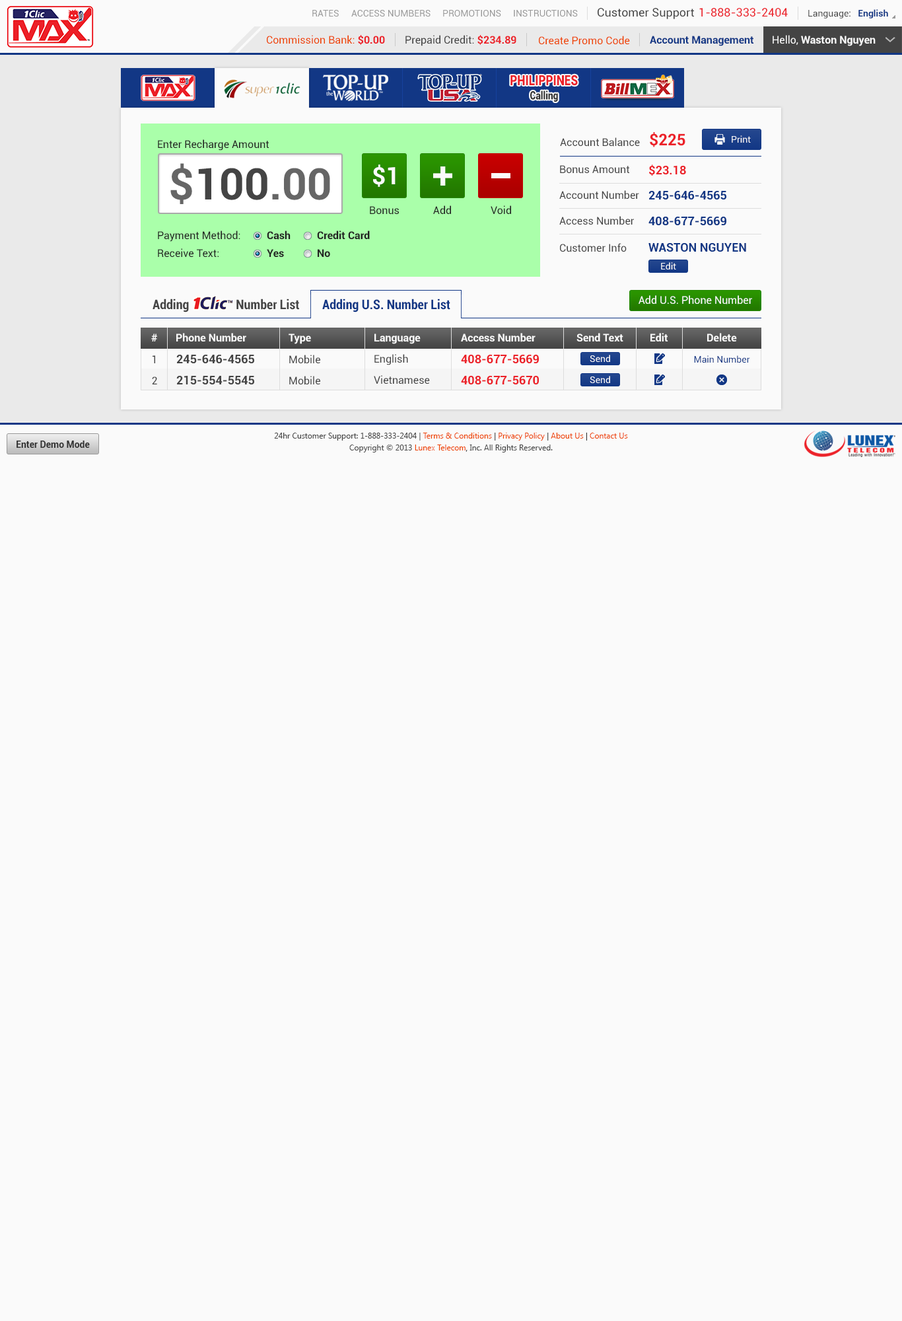
<style>
.page{position:relative;width:902px;height:1321px;background:#fafafa}
.page>*{position:absolute;margin:0}
.t1{font:9.2px "Roboto-Regular";color:#999999}
.t2{font:11.6px "Roboto-Regular";color:#444444}
.t3{font:11.6px "Roboto-Regular";color:#ec2029}
.t4{font:9.2px "Roboto-Regular";color:#444444}
.t5{font:9.2px "Roboto-Bold";color:#123785}
.t6{font:10.6px "Roboto-Regular";color:#ee4400}
.t7{font:10.6px "Roboto-Bold";color:#ec2028}
.t8{font:10.6px "Roboto-Regular";color:#444444}
.t9{font:10.6px "Roboto-Bold";color:#123785}
.t10{font:10.6px "Roboto-Bold";color:#fafafa}
.t11{font:10.6px "Roboto-Regular";color:#fafafa}
.t12{font:14.1px "Roboto-Black";color:#ec2028;scale:0.81 1}
.t13{font:11.3px "Roboto-Black";color:#333333;scale:0.81 1}
.t14{font:15.9px "Roboto-Bold";color:#ec2028}
.t15{font:9.2px "Roboto-Regular";color:#fafafa}
.t16{font:10.6px "Roboto-Regular";color:#222222}
.t17{font:43.6px "Roboto-Bold";color:#444444}
.t18{font:43.6px "Roboto-Bold";color:#666666}
.t19{font:23.8px "Roboto-Bold";color:#fafafa}
.t20{font:11.9px "Roboto-Bold";color:#ec2028}
.t21{font:11.9px "Roboto-Bold";color:#123785}
.t22{font:10.6px "Roboto-Bold";color:#222222}
.t23{font:13.2px "Roboto-BoldCondensed";color:#444444}
.t24{font:13.2px "Roboto-BoldCondensed";color:#123785}
.t25{font:11.9px "Roboto-Bold";color:#444444}
.t26{font:11.9px "Roboto-Bold";color:#ec2129}
.t27{font:9.2px "Roboto-Regular";color:#123785}
.t28{font:7.9px/11.9px "SegoeUI";color:#444444}
.t29{font:7.9px/11.9px "SegoeUI";color:#ee4400}
.t30{font:7.9px/11.9px "SegoeUI";color:#333333}
.t31{font:9.2px "Roboto-Bold";color:#333333}
</style>
<div class="page">
<p class="t1" style="left:312px;top:10px;width:27px;height:7px">RATES</p>
<p class="t1" style="left:351px;top:10px;width:80px;height:7px">ACCESS NUMBERS</p>
<p class="t1" style="left:443px;top:10px;width:58px;height:7px">PROMOTIONS</p>
<p class="t1" style="left:514px;top:10px;width:64px;height:7px">INSTRUCTIONS</p>
<p class="t2" style="left:598px;top:8px;width:96px;height:11px">Customer Support</p>
<p class="t3" style="left:700px;top:8px;width:88px;height:9px">1-888-333-2404</p>
<p class="t4" style="left:809px;top:9px;width:80px;height:9px">Language:   <span class="t5">English</span></p>
<p class="t6" style="left:267px;top:35px;width:118px;height:10px">Commission Bank: <span class="t7">$0.00</span></p>
<p class="t8" style="left:406px;top:35px;width:111px;height:11px">Prepaid Credit: <span class="t7">$234.89</span></p>
<p class="t6" style="left:539px;top:36px;width:91px;height:9px">Create Promo Code</p>
<p class="t9" style="left:650px;top:36px;width:104px;height:10px">Account Management</p>
<p class="t10" style="left:773px;top:35px;width:103px;height:11px"><span class="t11">Hello, </span>Waston Nguyen</p>
<p class="t12" style="left:511px;top:75px;width:67px;height:11px">PHILIPPINES</p>
<p class="t13" style="left:531px;top:91px;width:27px;height:11px">Calling</p>
<p class="t8" style="left:560px;top:137px;width:80px;height:10px">Account Balance</p>
<p class="t14" style="left:650px;top:132px;width:36px;height:15px">$225</p>
<p class="t15" style="left:732px;top:135px;width:19px;height:8px">Print</p>
<p class="t16" style="left:158px;top:139px;width:112px;height:12px">Enter Recharge Amount</p>
<p class="t17" style="left:170px;top:163px;width:160px;height:41px"><span class="t18">$</span>100<span class="t18">.00</span></p>
<p class="t19" style="left:373px;top:165px;width:23px;height:22px">$1</p>
<p class="t8" style="left:560px;top:165px;width:70px;height:9px">Bonus Amount</p>
<p class="t20" style="left:649px;top:165px;width:37px;height:11px">$23.18</p>
<p class="t8" style="left:560px;top:190px;width:80px;height:10px">Account Number</p>
<p class="t21" style="left:649px;top:191px;width:78px;height:9px">245-646-4565</p>
<p class="t16" style="left:370px;top:206px;width:29px;height:9px">Bonus</p>
<p class="t16" style="left:433px;top:205px;width:18px;height:9px">Add</p>
<p class="t16" style="left:491px;top:205px;width:20px;height:9px">Void</p>
<p class="t8" style="left:560px;top:216px;width:74px;height:9px">Access Number</p>
<p class="t21" style="left:649px;top:217px;width:78px;height:8px">408-677-5669</p>
<p class="t16" style="left:158px;top:231px;width:82px;height:11px">Payment Method:</p>
<p class="t22" style="left:267px;top:231px;width:24px;height:9px">Cash</p>
<p class="t22" style="left:317px;top:231px;width:53px;height:9px">Credit Card</p>
<p class="t8" style="left:560px;top:243px;width:67px;height:9px">Customer Info</p>
<p class="t21" style="left:649px;top:243px;width:98px;height:9px">WASTON NGUYEN</p>
<p class="t16" style="left:158px;top:248px;width:61px;height:9px">Receive Text:</p>
<p class="t22" style="left:267px;top:249px;width:17px;height:8px">Yes</p>
<p class="t22" style="left:318px;top:249px;width:12px;height:8px">No</p>
<p class="t15" style="left:661px;top:262px;width:16px;height:8px">Edit</p>
<p class="t23" style="left:153px;top:299px;width:146px;height:13px">Adding                Number List</p>
<p class="t24" style="left:322px;top:299px;width:129px;height:13px">Adding U.S. Number List</p>
<p class="t11" style="left:639px;top:295px;width:113px;height:10px">Add U.S. Phone Number</p>
<p class="t10" style="left:151px;top:334px;width:6px;height:8px">#</p>
<p class="t10" style="left:176px;top:333px;width:70px;height:9px">Phone Number</p>
<p class="t10" style="left:289px;top:334px;width:22px;height:10px">Type</p>
<p class="t10" style="left:375px;top:334px;width:46px;height:10px">Language</p>
<p class="t10" style="left:461px;top:333px;width:75px;height:9px">Access Number</p>
<p class="t10" style="left:577px;top:333px;width:47px;height:9px">Send Text</p>
<p class="t10" style="left:651px;top:333px;width:18px;height:9px">Edit</p>
<p class="t10" style="left:708px;top:333px;width:29px;height:9px">Delete</p>
<p class="t8" style="left:153px;top:355px;width:2px;height:8px">1</p>
<p class="t25" style="left:176px;top:355px;width:78px;height:8px">245-646-4565</p>
<p class="t8" style="left:289px;top:355px;width:31px;height:9px">Mobile</p>
<p class="t8" style="left:375px;top:354px;width:33px;height:11px">English</p>
<p class="t26" style="left:461px;top:355px;width:78px;height:8px">408-677-5669</p>
<p class="t15" style="left:590px;top:355px;width:20px;height:7px">Send</p>
<p class="t27" style="left:694px;top:355px;width:57px;height:8px">Main Number</p>
<p class="t8" style="left:152px;top:377px;width:5px;height:8px">2</p>
<p class="t25" style="left:176px;top:376px;width:78px;height:9px">215-554-5545</p>
<p class="t8" style="left:289px;top:376px;width:31px;height:9px">Mobile</p>
<p class="t8" style="left:374px;top:375px;width:56px;height:10px">Vietnamese</p>
<p class="t26" style="left:461px;top:376px;width:78px;height:9px">408-677-5670</p>
<p class="t15" style="left:590px;top:376px;width:20px;height:7px">Send</p>
<p class="t28" style="left:274px;top:433px;width:354px;height:20px;text-align:center">24hr Customer Support: 1-888-333-2404 | <span class="t29">Terms &amp; Conditions</span><span class="t30"> | </span><span class="t29">Privacy Policy</span><span class="t30"> | </span><span class="t29">About Us</span><span class="t30"> | </span><span class="t29">Contact Us<br></span>Copyright © 2013 <span class="t29">Lunex Telecom</span><span class="t30">,</span> Inc. All Rights Reserved.</p>
<p class="t31" style="left:17px;top:441px;width:73px;height:7px">Enter Demo Mode</p>
</div>
